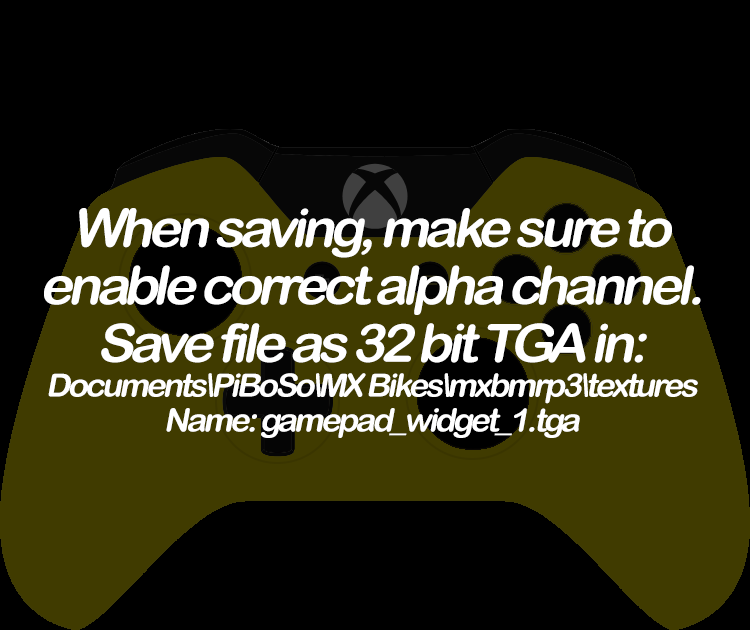
<style>
.page{position:relative;width:750px;height:630px;background:#000000}
.page>*{position:absolute;margin:0}
.t1{font:52.8px "ArialRoundedMTBold";letter-spacing:-0.085em;color:#ffffff;font-style:italic;scale:1.05 1}
.t2{font:31.9px "ArialRoundedMTBold";letter-spacing:-0.085em;color:#ffffff;font-style:italic;scale:1.05 1}
</style>
<div class="page">
<p class="t1" style="left:44px;top:208px;width:657px;height:230px;text-align:center">When saving, make sure to<br>enable correct alpha channel.<br>Save file as 32 bit TGA in:<br><span class="t2">Documents\PiBoSo\MX Bikes\mxbmrp3\textures<br>Name: gamepad_widget_1.tga</span></p>
</div>
